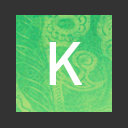
<style>
.page{position:relative;width:128px;height:128px;background:#333333}
.page>*{position:absolute;margin:0}
.t1{font:60px "DINMittelschrift";letter-spacing:0.018em;color:#ffffff}
</style>
<div class="page">
<p class="t1" style="left:49px;top:42px;width:34px;height:43px">K</p>
</div>
